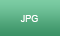
<style>
.page{position:relative;width:60px;height:36px}
.page>*{position:absolute;margin:0}
.t1{font:9px "ArialMT";color:#ffffff}
</style>
<div class="page">
<p class="t1" style="left:20px;top:15px;width:18px;height:7px">JPG</p>
</div>
